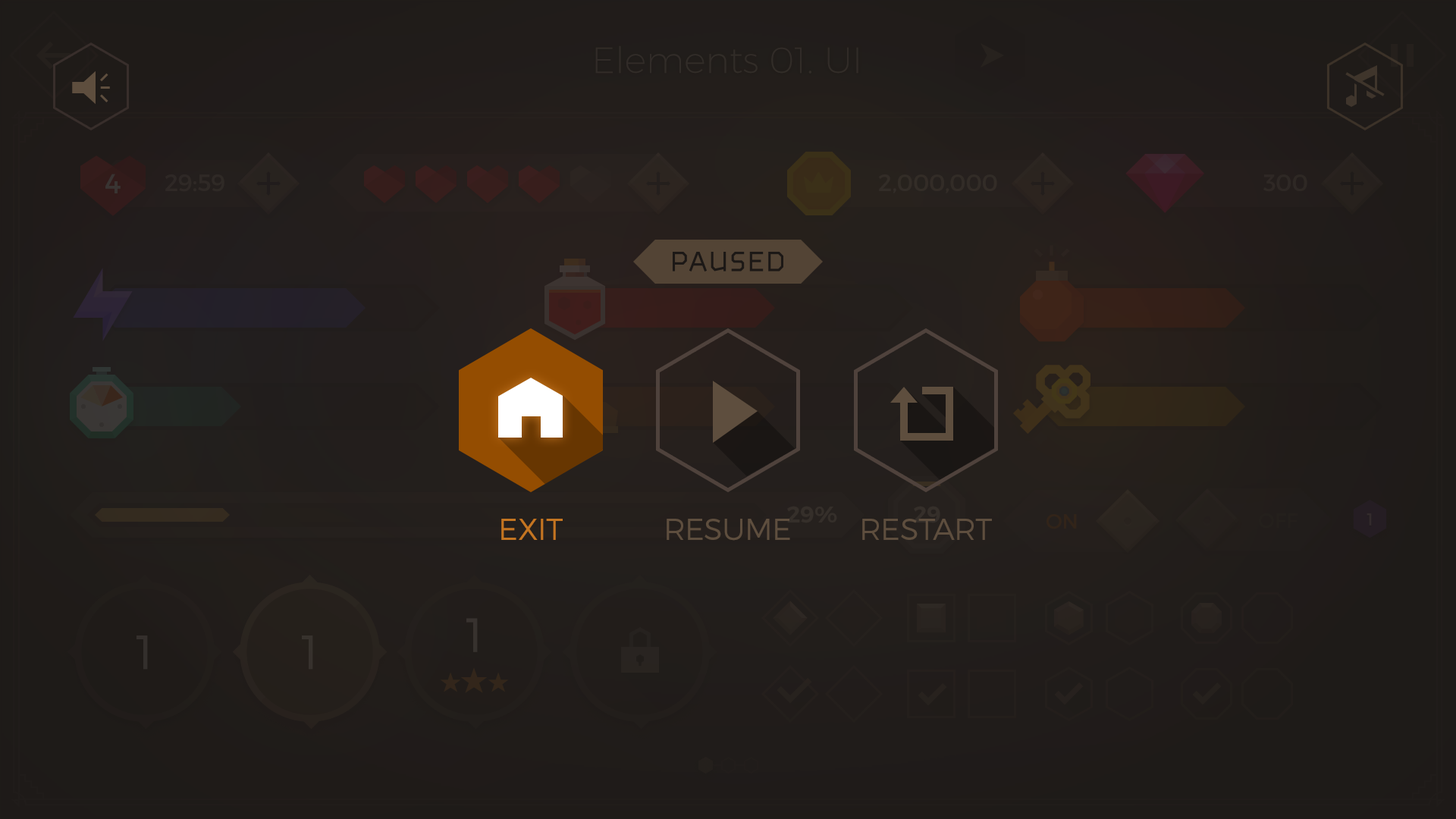
<style>
.page{position:relative;width:1456px;height:819px}
.page>*{position:absolute;margin:0}
.t1{font:30.3px "Montserrat-Light";color:#c47521;text-transform:uppercase}
.t2{font:30.3px "Montserrat-Light";color:#5e4e3e;text-transform:uppercase}
</style>
<div class="page">
<p class="t1" style="left:501px;top:519px;width:62px;height:21px">exit</p>
<p class="t2" style="left:667px;top:519px;width:123px;height:22px">Resume</p>
<p class="t2" style="left:862px;top:519px;width:130px;height:21px">restart</p>
</div>
